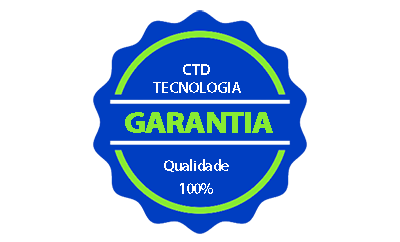
<style>
.page{position:relative;width:400px;height:242px;background:#ffffff}
.page>*{position:absolute;margin:0}
.t1{font:15.9px/18.5px "MyriadPro-Semibold";letter-spacing:-0.02em;color:#ffffff}
.t2{font:15.9px/18.5px "MyriadPro-Bold";letter-spacing:-0.02em;color:#ffffff}
.t3{font:29.7px "MyriadPro-Bold";letter-spacing:-0.04em;color:#87eb33;font-weight:bold;scale:1.07 1}
.t4{font:15.9px "MyriadPro-Semibold";letter-spacing:-0.04em;color:#ffffff}
.t5{font:15.9px "MyriadPro-Semibold";letter-spacing:-0.08em;color:#ffffff}
</style>
<div class="page">
<p class="t1" style="left:153px;top:64px;width:88px;height:29px;text-align:center"><span class="t2">CTD<br></span>TECNOLOGIA</p>
<p class="t3" style="left:125px;top:112px;width:148px;height:21px">GARANTIA</p>
<p class="t4" style="left:164px;top:159px;width:65px;height:13px">Qualidade</p>
<p class="t5" style="left:180px;top:183px;width:33px;height:11px">100%</p>
</div>
